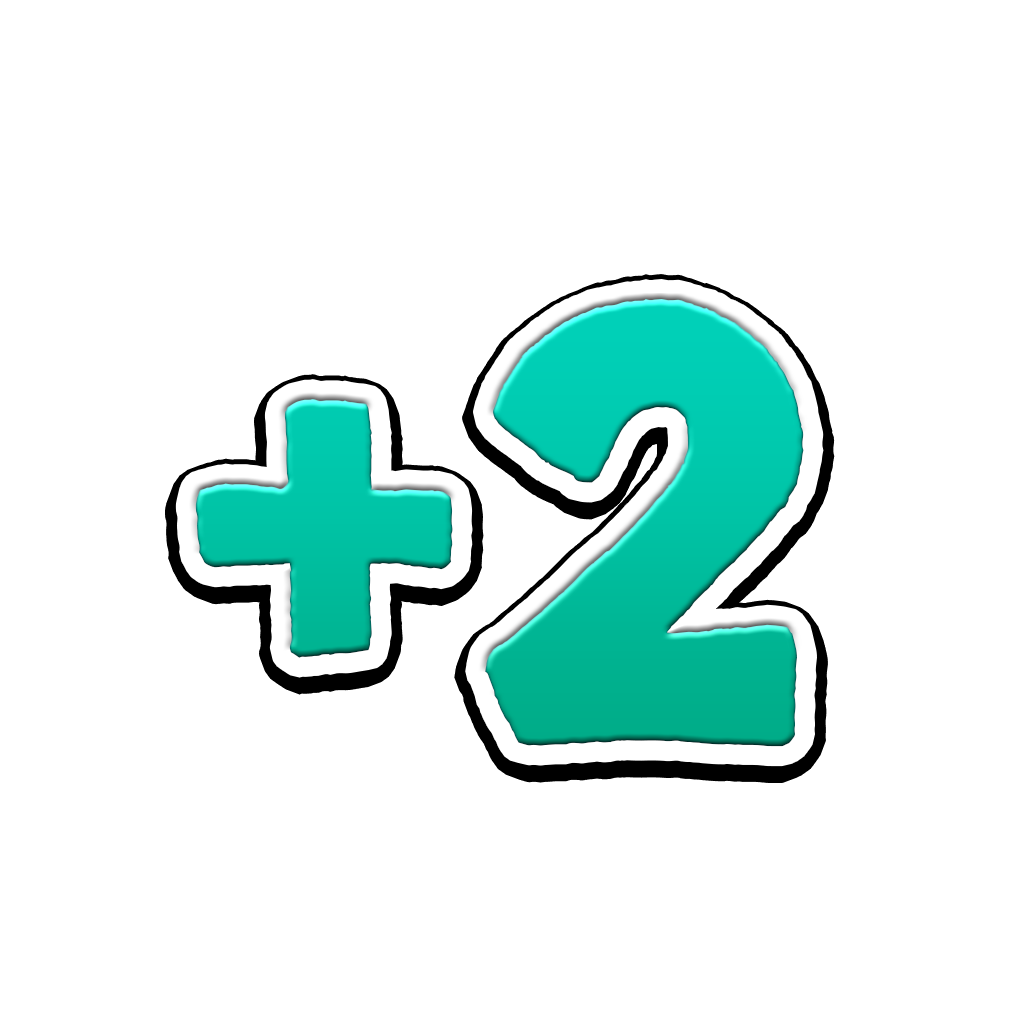
<style>
.page{position:relative;width:1024px;height:1024px;background:#ffffff}
.page>*{position:absolute;margin:0}
.t1{font:600px "Skranji-Bold";color:#00c3a5}
</style>
<div class="page">
<p class="t1" style="left:195px;top:299px;width:609px;height:448px">+2</p>
</div>
